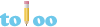
<style>
.page{position:relative;width:100px;height:27px;background:#ffffff}
.page>*{position:absolute;margin:0}
.t1{font:20px "CooperBlackStd";letter-spacing:-0.025em;color:#6ec8ea}
</style>
<div class="page">
<p class="t1" style="left:0px;top:13px;width:57px;height:14px">to  oo</p>
</div>
